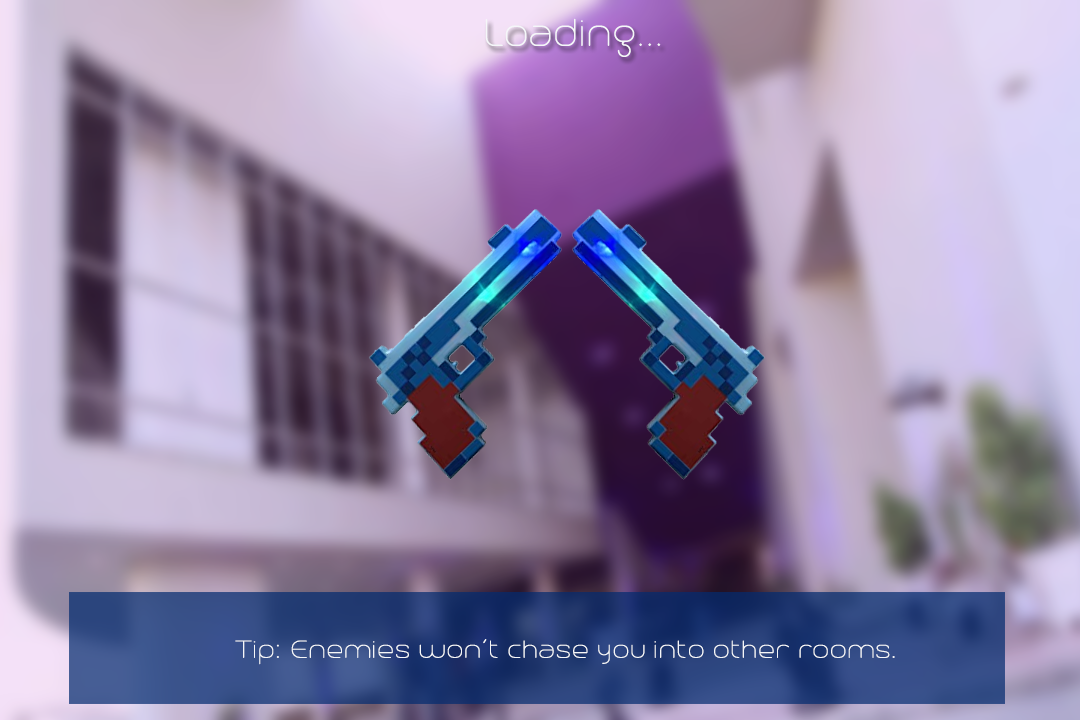
<style>
.page{position:relative;width:1080px;height:720px}
.page>*{position:absolute;margin:0}
.t1{font:48px "Trench-Thin";color:#f5f7f9}
.t2{font:30.8px "Trench-Thin";color:#f5f7f9;scale:1.09 1}
</style>
<div class="page">
<p class="t1" style="left:485px;top:18px;width:176px;height:39px">Loading...</p>
<p class="t2" style="left:235px;top:639px;width:660px;height:26px">Tip: Enemies won’t chase you into other rooms.</p>
</div>
